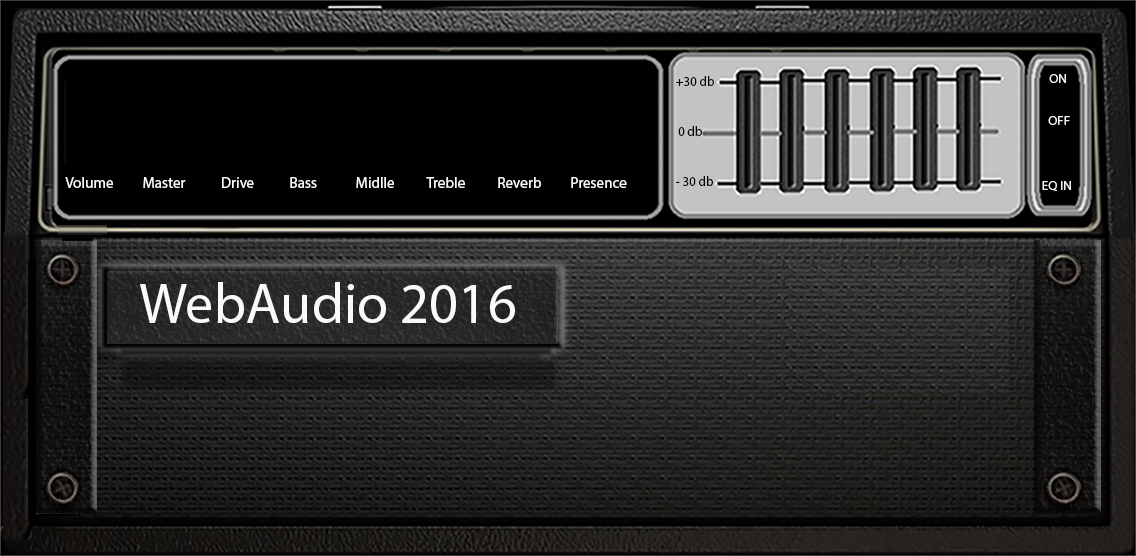
<style>
.page{position:relative;width:1136px;height:556px;background:#000000}
.page>*{position:absolute;margin:0}
.t1{font:13px "MyriadPro-Regular";color:#020006}
.t2{font:13px "MyriadPro-Regular";color:#f5f4f8}
.t3{font:15.2px "MyriadPro-Regular";color:#fcfaf9}
.t4{font:56.8px "MyriadPro-Regular";color:#f9f9fb}
</style>
<div class="page">
<p class="t1" style="left:676px;top:76px;width:38px;height:10px">+30 db</p>
<p class="t2" style="left:1049px;top:74px;width:17px;height:9px">ON</p>
<p class="t1" style="left:678px;top:126px;width:24px;height:10px">0 db</p>
<p class="t2" style="left:1048px;top:116px;width:22px;height:9px">OFF</p>
<p class="t3" style="left:65px;top:177px;width:562px;height:11px">Volume         Master           Drive           Bass            Midlle          Treble          Reverb         Presence</p>
<p class="t1" style="left:676px;top:176px;width:37px;height:10px">- 30 db</p>
<p class="t2" style="left:1042px;top:181px;width:29px;height:10px">EQ IN</p>
<p class="t4" style="left:140px;top:282px;width:375px;height:41px">WebAudio 2016</p>
</div>
